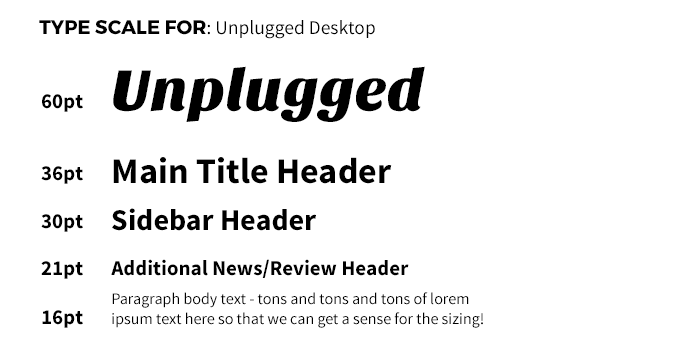
<style>
.page{position:relative;width:680px;height:356px;background:#ffffff}
.page>*{position:absolute;margin:0}
.t1{font:19.5px "SourceSansPro-Regular";color:#000000}
.t2{font:19.5px "Montserrat-Bold";color:#000000;text-transform:uppercase}
.t3{font:60px "SansitaOne";color:#000000}
.t4{font:21px "SourceSansPro-Bold";color:#000000}
.t5{font:36px "SourceSansPro-Bold";color:#000000}
.t6{font:30px "SourceSansPro-Bold";color:#000000}
.t7{font:16px/19.5px "SourceSansPro-Regular";color:#000000}
</style>
<div class="page">
<p class="t1" style="left:39px;top:20px;width:336px;height:19px"><span class="t2">TYPE SCALE for</span>: Unplugged Desktop</p>
<p class="t3" style="left:113px;top:66px;width:312px;height:56px">Unplugged</p>
<p class="t4" style="left:42px;top:94px;width:41px;height:18px">60pt</p>
<p class="t5" style="left:113px;top:157px;width:279px;height:27px">Main Title Header</p>
<p class="t4" style="left:41px;top:166px;width:42px;height:18px">36pt</p>
<p class="t6" style="left:112px;top:208px;width:204px;height:23px">Sidebar Header</p>
<p class="t4" style="left:41px;top:214px;width:42px;height:18px">30pt</p>
<p class="t4" style="left:41px;top:261px;width:42px;height:18px">21pt</p>
<p class="t4" style="left:111px;top:259px;width:298px;height:19px">Additional News/Review Header</p>
<p class="t7" style="left:112px;top:292px;width:371px;height:36px">Paragraph body text - tons and tons and tons of lorem ipsum text here so that we can get a sense for the sizing!</p>
<p class="t4" style="left:42px;top:310px;width:41px;height:18px">16pt</p>
</div>
